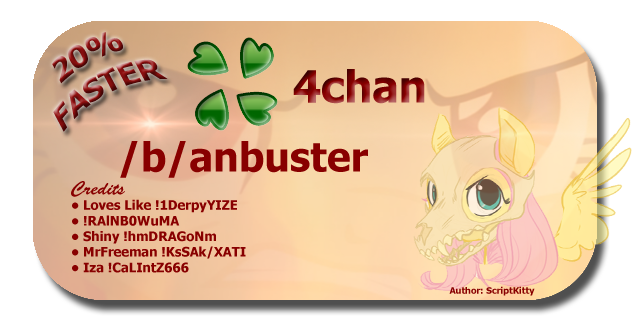
<style>
.page{position:relative;width:636px;height:329px;background:#ffffff}
.page>*{position:absolute;margin:0}
.t1{font:30px "Tahoma-Bold"}
.t2{font:44px "Tahoma-Bold"}
.t3{font:13px "Tahoma-Bold";color:#880000}
.t4{font:40px "Tahoma-Bold";color:#880000}
.t5{font:19px "BrushScriptStd";color:#880000}
.t6{font:9px "Tahoma-Bold";color:#880000}
</style>
<div class="page">
<p class="t1" style="left:52px;top:32px;width:116px;height:100px;text-align:center;rotate:-28deg">20%<br>FASTER</p>
<p class="t2" style="left:293px;top:69px;width:132px;height:35px">4chan</p>
<p class="t3" style="left:71px;top:141px;width:464px;height:155px"><span class="t4">    /b/anbuster<br></span><span class="t5">Credits<br></span>• Loves Like !1DerpyYIZE<br>• !RAlNB0WuMA<br>• Shiny !hmDRAGoNm<br>• MrFreeman !KsSAk/XATI<br>• Iza !CaLIntZ666                                                                                                                                                          <br><span class="t6">                <br>                 Author: ScriptKitty</span></p>
</div>
